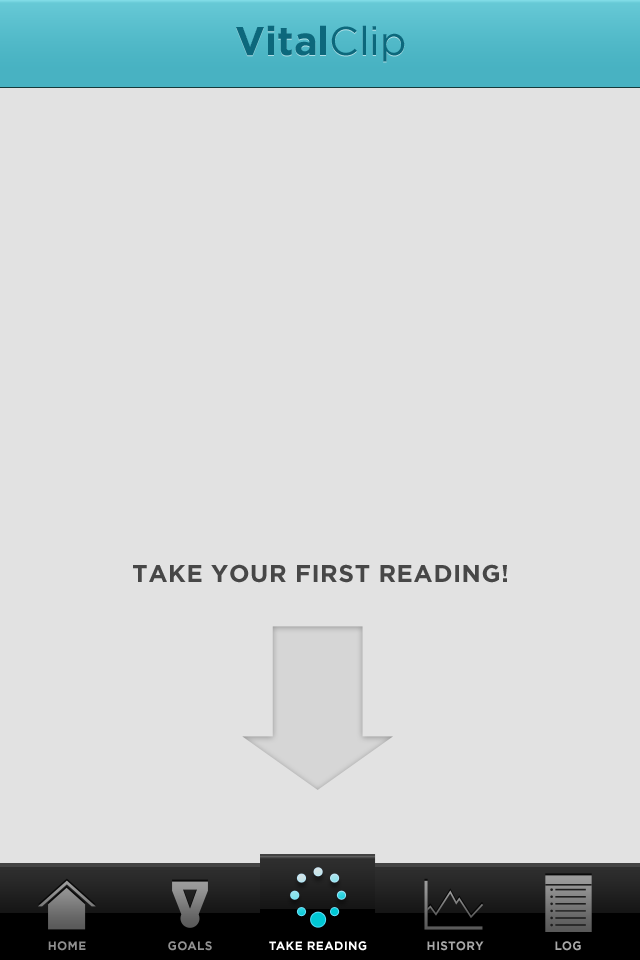
<style>
.page{position:relative;width:640px;height:960px;background:#e2e2e2}
.page>*{position:absolute;margin:0}
.t1{font:40px "Gotham-Bold";color:#0c687c}
.t2{font:40px "Gotham-Book";color:#0c687c}
.t3{font:24.2px "Gotham-Bold";letter-spacing:0.025em;color:#464646;text-transform:uppercase}
.t4{font:12px "Gotham-Bold";letter-spacing:0.025em;color:#8f8f8f;text-transform:uppercase}
.t5{font:12px "Gotham-Bold";letter-spacing:0.025em;color:#929292;text-transform:uppercase}
.t6{font:12px "Gotham-Bold";letter-spacing:0.025em;color:#ffffff;text-transform:uppercase}
.t7{font:12px "Gotham-Bold";letter-spacing:0.025em;color:#a8a8a8;text-transform:uppercase}
</style>
<div class="page">
<p class="t1" style="left:236px;top:25px;width:169px;height:37px">Vital<span class="t2">Clip</span></p>
<p class="t3" style="left:133px;top:564px;width:374px;height:19px">Take your first reading!</p>
<p class="t4" style="left:48px;top:941px;width:38px;height:10px">Home</p>
<p class="t5" style="left:168px;top:941px;width:44px;height:10px">Goals</p>
<p class="t6" style="left:269px;top:941px;width:98px;height:10px">Take reading</p>
<p class="t7" style="left:427px;top:941px;width:57px;height:10px">History</p>
<p class="t7" style="left:555px;top:941px;width:26px;height:10px">Log</p>
</div>
